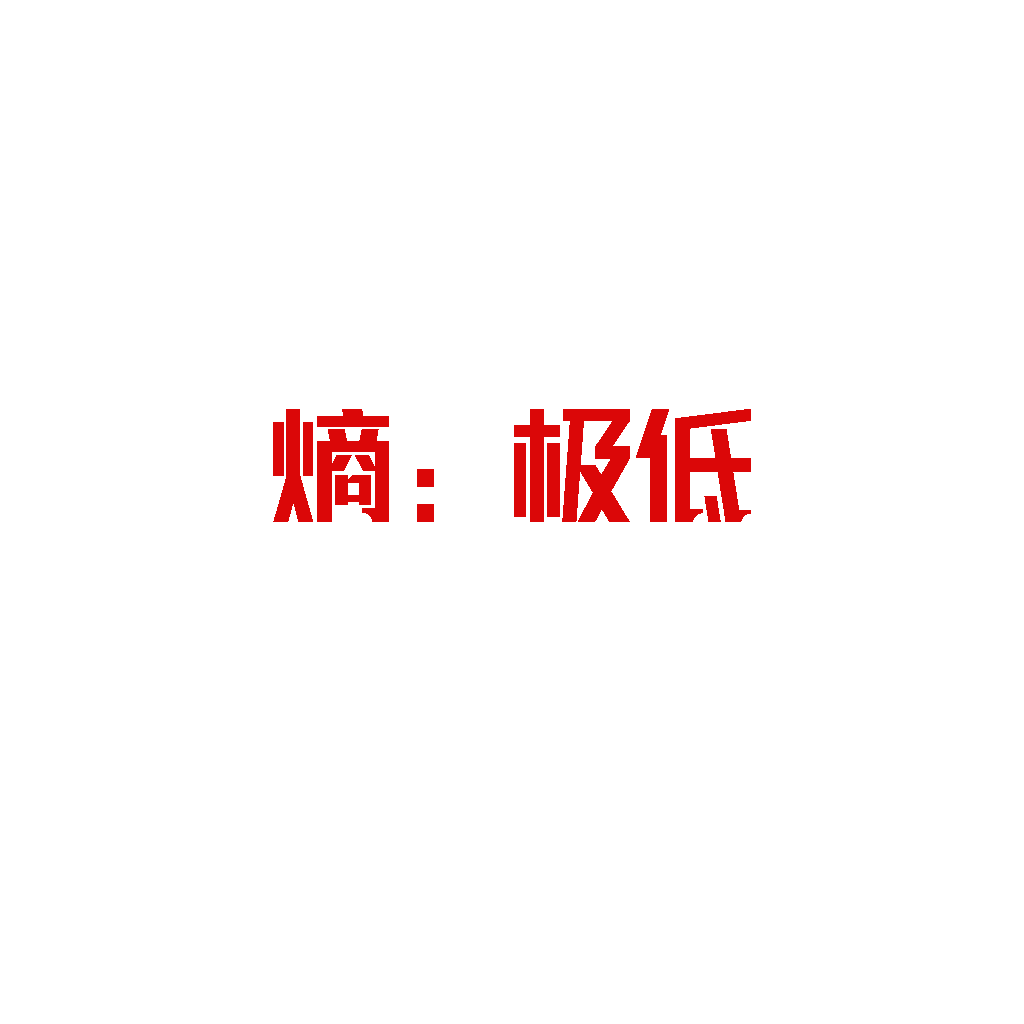
<style>
.page{position:relative;width:1024px;height:1024px;background:#ffffff}
.page>*{position:absolute;margin:0}
.t1{font:113px "lianmengqiyilushuaizhengruiheiti-Regular";color:#db0708}
</style>
<div class="page">
<p class="t1" style="left:273px;top:409px;width:478px;height:113px">熵：极低</p>
</div>
